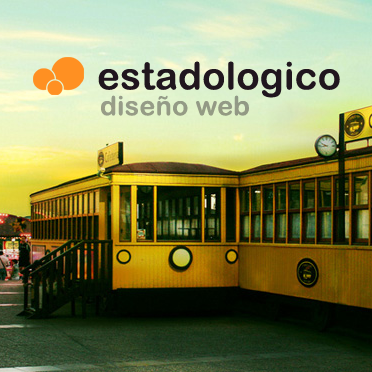
<style>
.page{position:relative;width:372px;height:372px}
.page>*{position:absolute;margin:0}
.t1{font:38.1px "ArialRoundedMTBold";letter-spacing:0.01em;color:#20161e}
.t2{font:26.8px "ArialRoundedMTBold";letter-spacing:0.01em;color:#959b86}
</style>
<div class="page">
<p class="t1" style="left:98px;top:61px;width:242px;height:37px">estadologico</p>
<p class="t2" style="left:101px;top:95px;width:148px;height:21px">diseño web</p>
</div>
